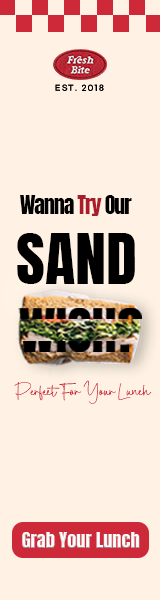
<style>
.page{position:relative;width:160px;height:600px;background:#fff2e4}
.page>*{position:absolute;margin:0}
.t1{font:7.3px "GmarketSansMedium";letter-spacing:0.2em;color:#000000}
.t2{font:20.9px "Anton-Regular";letter-spacing:-0.05em;color:#000000;scale:1.06 1}
.t3{font:20.9px "Anton-Regular";letter-spacing:-0.05em;color:#ab1c2a;scale:1.06 1}
.t4{font:59.2px "Anton-Regular";color:#000000;scale:1.06 1}
.t5{font:20.8px "SabrinaDestiny";letter-spacing:-0.05em;color:#ce2939;scale:1.05 1}
.t6{font:18.3px "Anton-Regular";color:#ffffff}
</style>
<div class="page">
<p class="t1" style="left:55px;top:84px;width:49px;height:7px">EST. 2018</p>
<p class="t2" style="left:20px;top:195px;width:112px;height:21px">Wanna <span class="t3">Try </span>Our</p>
<p class="t4" style="left:17px;top:233px;width:118px;height:51px">SAND</p>
<p class="t5" style="left:14px;top:380px;width:138px;height:24px">Perfect For Your Lunch</p>
<p class="t6" style="left:22px;top:532px;width:118px;height:16px">Grab Your Lunch</p>
</div>
